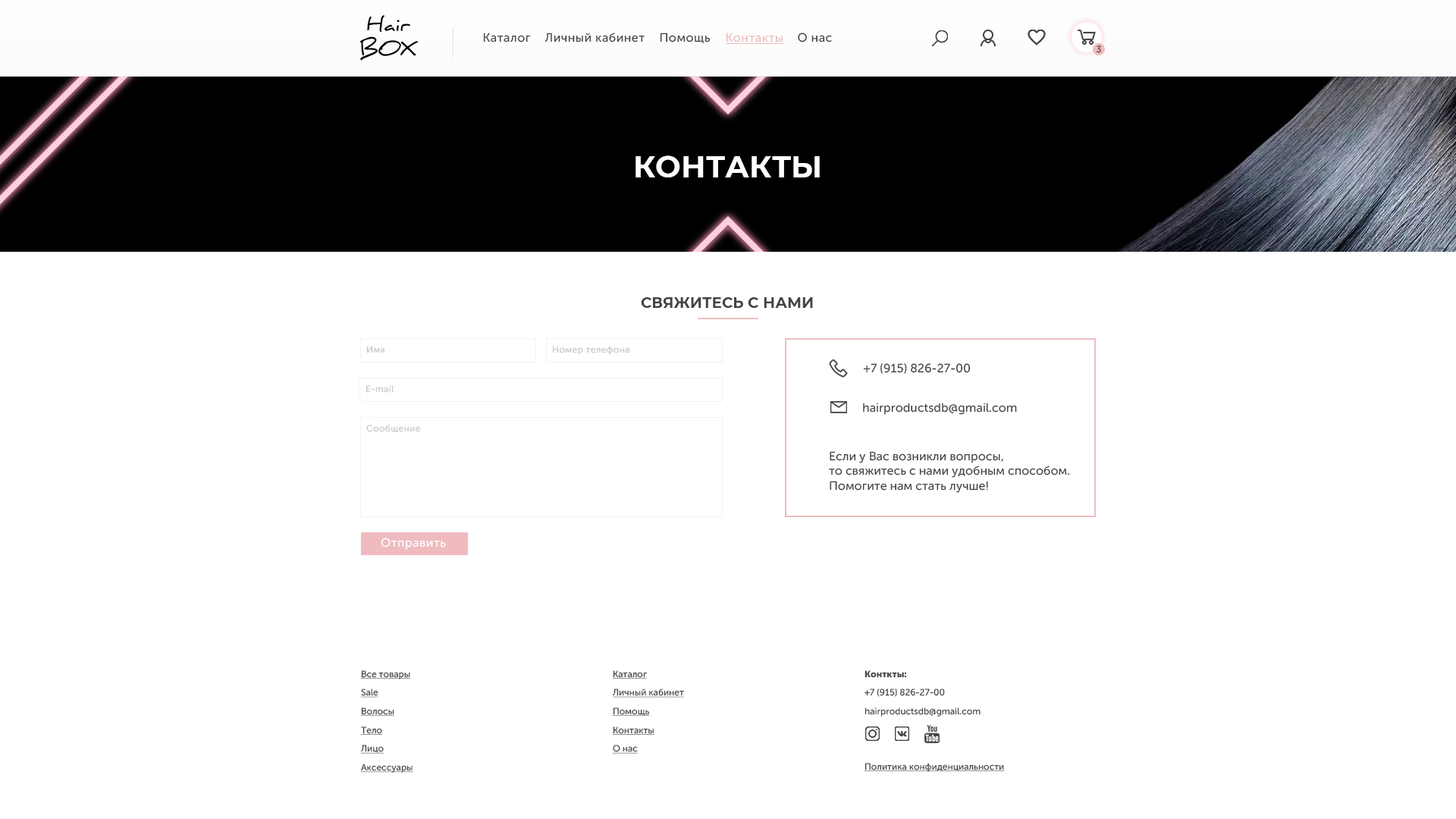
<style>
.page{position:relative;width:1456px;height:819px;background:#ffffff}
.page>*{position:absolute;margin:0}
.t1{font:12.1px "MuseoSansCyrl-500";letter-spacing:0.03em;color:#444444}
.t2{font:12.1px "MuseoSansCyrl-500";letter-spacing:0.03em;color:#efbbbf}
.t3{font:9.1px "MuseoSansCyrl-500";letter-spacing:0.03em;color:#444444}
.t4{font:30.3px "Montserrat-Bold";color:#ffffff;text-transform:uppercase}
.t5{font:15px "Montserrat-Bold";color:#444444;text-transform:uppercase}
.t6{font:9.1px "MuseoSansCyrl-500";letter-spacing:0.03em;color:#c9c9c9}
.t7{font:12.1px "MuseoSansCyrl-500";color:#444444}
.t8{font:12.1px "MuseoSansCyrl-500";letter-spacing:0.03em;color:#ffffff}
.t9{font:9.1px/18.7px "MuseoSansCyrl-500";color:#444444;text-decoration:underline}
.t10{font:9.1px/18.7px "MuseoSansCyrl-500";color:#444444}
.t11{font:9.1px/18.7px "MuseoSansCyrl-900";color:#444444}
.t12{font:9.1px "MuseoSansCyrl-500";color:#444444;text-decoration:underline}
</style>
<div class="page">
<p class="t1" style="left:483px;top:33px;width:48px;height:9px">Каталог</p>
<p class="t1" style="left:544px;top:33px;width:101px;height:9px">Личный кабинет</p>
<p class="t1" style="left:660px;top:33px;width:51px;height:10px">Помощь</p>
<p class="t2" style="left:726px;top:33px;width:57px;height:9px">Контакты</p>
<p class="t1" style="left:798px;top:33px;width:34px;height:9px">О нас</p>
<p class="t3" style="left:1097px;top:45px;width:4px;height:8px">3</p>
<p class="t4" style="left:635px;top:155px;width:185px;height:22px">контакты</p>
<p class="t5" style="left:641px;top:297px;width:172px;height:11px">свяжитесь с нами</p>
<p class="t6" style="left:366px;top:346px;width:18px;height:7px">Имя</p>
<p class="t6" style="left:552px;top:346px;width:77px;height:9px">Номер телефона</p>
<p class="t7" style="left:863px;top:363px;width:108px;height:11px">+7 (915) 826-27-00</p>
<p class="t6" style="left:366px;top:385px;width:28px;height:8px">E-mail</p>
<p class="t7" style="left:863px;top:403px;width:154px;height:12px">hairproductsdb@gmail.com</p>
<p class="t6" style="left:366px;top:425px;width:55px;height:8px">Сообщение</p>
<p class="t7" style="left:829px;top:451px;width:241px;height:42px">Если у Вас возникли вопросы,<br>то свяжитесь с нами удобным способом. Помогите нам стать лучше!</p>
<p class="t8" style="left:381px;top:538px;width:65px;height:12px">Отправить</p>
<p class="t9" style="left:360px;top:670px;width:53px;height:103px">Все товары<br>Sale<br>Волосы<br>Тело<br>Лицо<br>Аксессуары</p>
<p class="t9" style="left:612px;top:670px;width:72px;height:84px">Каталог<br>Личный кабинет<br>Помощь<br>Контакты<br>О нас</p>
<p class="t10" style="left:864px;top:670px;width:117px;height:47px"><span class="t11">Конткты:<br></span>+7 (915) 826-27-00<br>hairproductsdb@gmail.com</p>
<p class="t12" style="left:864px;top:763px;width:141px;height:9px">Политика конфиденциальности</p>
</div>
